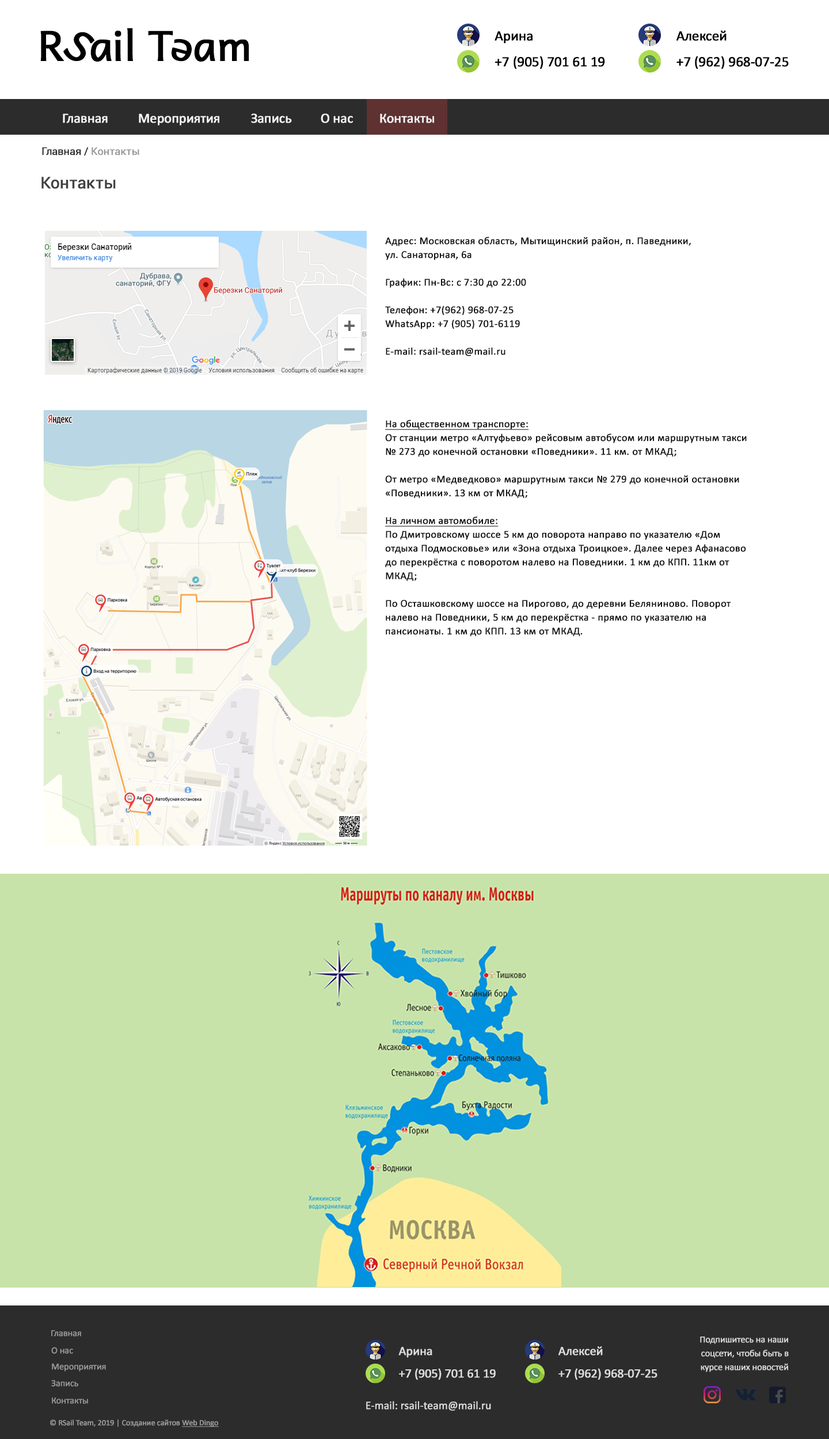
<style>
.page{position:relative;width:829px;height:1439px;background:#ffffff}
.page>*{position:absolute;margin:0}
.t1{font:41.3px "Andika";letter-spacing:-0.02em;color:#000000;font-weight:bold}
.t2{font:41.4px "Andika";letter-spacing:-0.02em;color:#000000;font-weight:bold}
.t3{font:14.4px "Calibri";letter-spacing:-0.02em;color:#000000;font-weight:bold}
.t4{font:13.8px "Calibri";letter-spacing:-0.02em;color:#f6f6f6;font-weight:bold}
.t5{font:10.4px "Roboto-Regular";letter-spacing:-0.02em;color:#2c2c2c;font-weight:bold}
.t6{font:10.4px "Roboto-Regular";letter-spacing:-0.02em;color:#999999;font-weight:bold}
.t7{font:16.1px "Roboto-Regular";letter-spacing:-0.02em;color:#414141;font-weight:bold}
.t8{font:10.4px/13.8px "Calibri";letter-spacing:0.005em;color:#111111;font-weight:bold}
.t9{font:10.4px/13.8px "Calibri";letter-spacing:0.005em;color:#111111;font-weight:bold;text-decoration:underline}
.t10{font:9.2px "Calibri";letter-spacing:-0.02em;color:#999999;font-weight:bold}
.t11{font:9.2px/13.8px "Calibri";letter-spacing:-0.02em;color:#dcdcdc;font-weight:bold}
.t12{font:12.7px "Calibri";letter-spacing:-0.02em;color:#dcdcdc;font-weight:bold}
.t13{font:11.5px "Calibri";letter-spacing:-0.02em;color:#dcdcdc;font-weight:bold}
.t14{font:8.1px "Calibri";letter-spacing:-0.02em;color:#999999;font-weight:bold}
</style>
<div class="page">
<p class="t1" style="left:127px;top:28px;width:6px;height:33px">l</p>
<p class="t1" style="left:40px;top:31px;width:24px;height:30px">R</p>
<p class="t2" style="left:63px;top:32px;width:32px;height:29px;rotate:34deg">S</p>
<p class="t1" style="left:90px;top:39px;width:22px;height:23px">a</p>
<p class="t1" style="left:115px;top:31px;width:6px;height:30px">i</p>
<p class="t1" style="left:148px;top:31px;width:25px;height:30px">T</p>
<p class="t1" style="left:172px;top:39px;width:20px;height:23px;rotate:-165deg">e</p>
<p class="t1" style="left:194px;top:39px;width:21px;height:23px">a</p>
<p class="t1" style="left:219px;top:39px;width:30px;height:22px">m</p>
<p class="t3" style="left:494px;top:31px;width:38px;height:12px">Арина</p>
<p class="t3" style="left:676px;top:31px;width:50px;height:10px">Алексей</p>
<p class="t3" style="left:494px;top:56px;width:111px;height:13px">+7 (905) 701 61 19</p>
<p class="t3" style="left:676px;top:56px;width:112px;height:13px">+7 (962) 968-07-25</p>
<p class="t4" style="left:63px;top:113px;width:45px;height:10px">Главная</p>
<p class="t4" style="left:139px;top:113px;width:80px;height:12px">Мероприятия</p>
<p class="t4" style="left:251px;top:113px;width:41px;height:10px">Запись</p>
<p class="t4" style="left:321px;top:113px;width:32px;height:10px">О нас</p>
<p class="t4" style="left:380px;top:113px;width:54px;height:10px">Контакты</p>
<p class="t5" style="left:42px;top:147px;width:97px;height:9px">Главная / <span class="t6">Контакты</span></p>
<p class="t7" style="left:41px;top:177px;width:75px;height:12px">Контакты</p>
<p class="t8" style="left:385px;top:237px;width:306px;height:119px">Адрес: Московская область, Мытищинский район, п. Паведники,<br>ул. Санаторная, 6а<br><br>График: Пн-Вс: с 7:30 до 22:00<br><br>Телефон: +7(962) 968-07-25<br>WhatsApp: +7 (905) 701-6119<br><br>E-mail: rsail-team@mail.ru</p>
<p class="t8" style="left:385px;top:420px;width:361px;height:217px"><span class="t9">На общественном транспорте:<br></span>От станции метро «Алтуфьево» рейсовым автобусом или маршрутным такси № 273 до конечной остановки «Поведники». 11 км. от МКАД;<br><br>От метро «Медведково» маршрутным такси № 279 до конечной остановки «Поведники». 13 км от МКАД;<br><br><span class="t9">На личном автомобиле:<br></span>По Дмитровскому шоссе 5 км до поворота направо по указателю «Дом отдыха Подмосковье» или «Зона отдыха Троицкое». Далее через Афанасово до перекрёстка с поворотом налево на Поведники. 1 км до КПП. 11км от МКАД;<br><br>По Осташковскому шоссе на Пирогово, до деревни Беляниново. Поворот налево на Поведники, 5 км до перекрёстка - прямо по указателю на пансионаты. 1 км до КПП. 13 км от МКАД.</p>
<p class="t10" style="left:51px;top:1330px;width:30px;height:6px">Главная</p>
<p class="t11" style="left:700px;top:1336px;width:88px;height:36px;text-align:right">Подпишитесь на наши<br>соцсети, чтобы быть в<br>курсе наших новостей</p>
<p class="t10" style="left:51px;top:1347px;width:22px;height:7px">О нас</p>
<p class="t12" style="left:398px;top:1347px;width:34px;height:11px">Арина</p>
<p class="t12" style="left:558px;top:1346px;width:45px;height:9px">Алексей</p>
<p class="t10" style="left:52px;top:1363px;width:54px;height:8px">Мероприятия</p>
<p class="t12" style="left:399px;top:1368px;width:97px;height:12px">+7 (905) 701 61 19</p>
<p class="t12" style="left:558px;top:1368px;width:99px;height:12px">+7 (962) 968-07-25</p>
<p class="t10" style="left:51px;top:1380px;width:27px;height:6px">Запись</p>
<p class="t10" style="left:52px;top:1397px;width:36px;height:7px">Контакты</p>
<p class="t13" style="left:366px;top:1401px;width:125px;height:10px">E-mail: rsail-team@mail.ru</p>
<p class="t14" style="left:50px;top:1419px;width:168px;height:8px">© RSail Team, 2019 | Создание сайтов Web Dingo</p>
</div>
